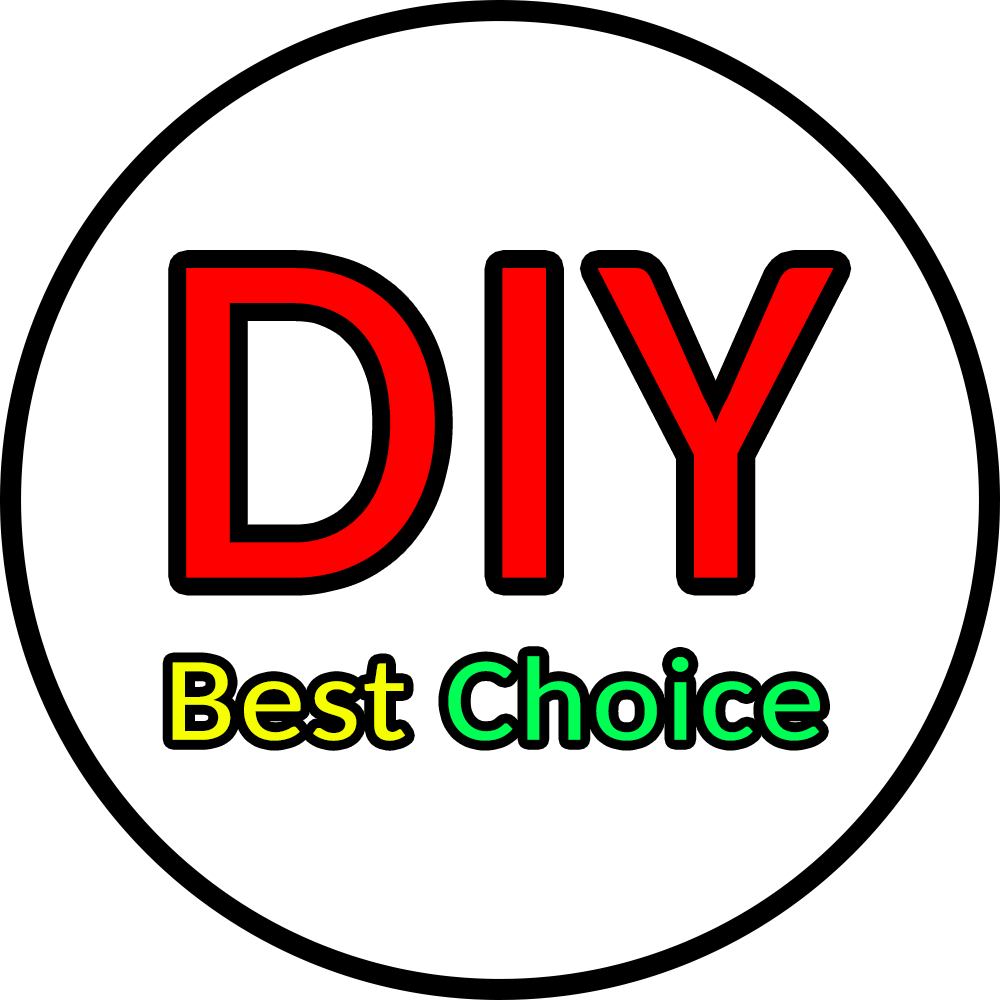
<style>
.page{position:relative;width:1000px;height:1000px;background:#ffffff}
.page>*{position:absolute;margin:0}
.t1{font:481.8px "Carlito";color:#ff0000;font-weight:bold}
.t2{font:119.9px "Carlito";color:#00ff55;font-weight:bold;scale:1.11 1}
.t3{font:119.9px "Carlito";color:#f6ff00;font-weight:bold;scale:1.11 1}
</style>
<div class="page">
<p class="t1" style="left:186px;top:268px;width:648px;height:310px">DIY</p>
<p class="t2" style="left:172px;top:656px;width:648px;height:85px"><span class="t3">Best </span>Choice</p>
</div>
